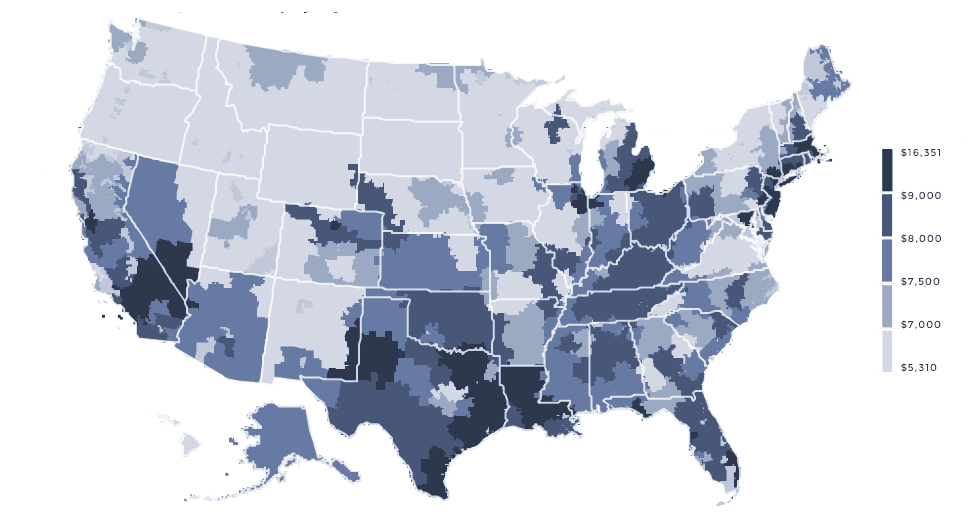
<style>
.page{position:relative;width:969px;height:526px;background:#ffffff}
.page>*{position:absolute;margin:0}
.t1{font:10px "Montserrat-Regular";letter-spacing:0.1em;color:#2e384c}
</style>
<div class="page">
<p class="t1" style="left:901px;top:148px;width:39px;height:9px">$16,351</p>
<p class="t1" style="left:901px;top:191px;width:40px;height:9px">$9,000</p>
<p class="t1" style="left:901px;top:234px;width:40px;height:9px">$8,000</p>
<p class="t1" style="left:901px;top:277px;width:39px;height:9px">$7,500</p>
<p class="t1" style="left:901px;top:320px;width:40px;height:9px">$7,000</p>
<p class="t1" style="left:901px;top:363px;width:36px;height:9px">$5,310</p>
</div>
